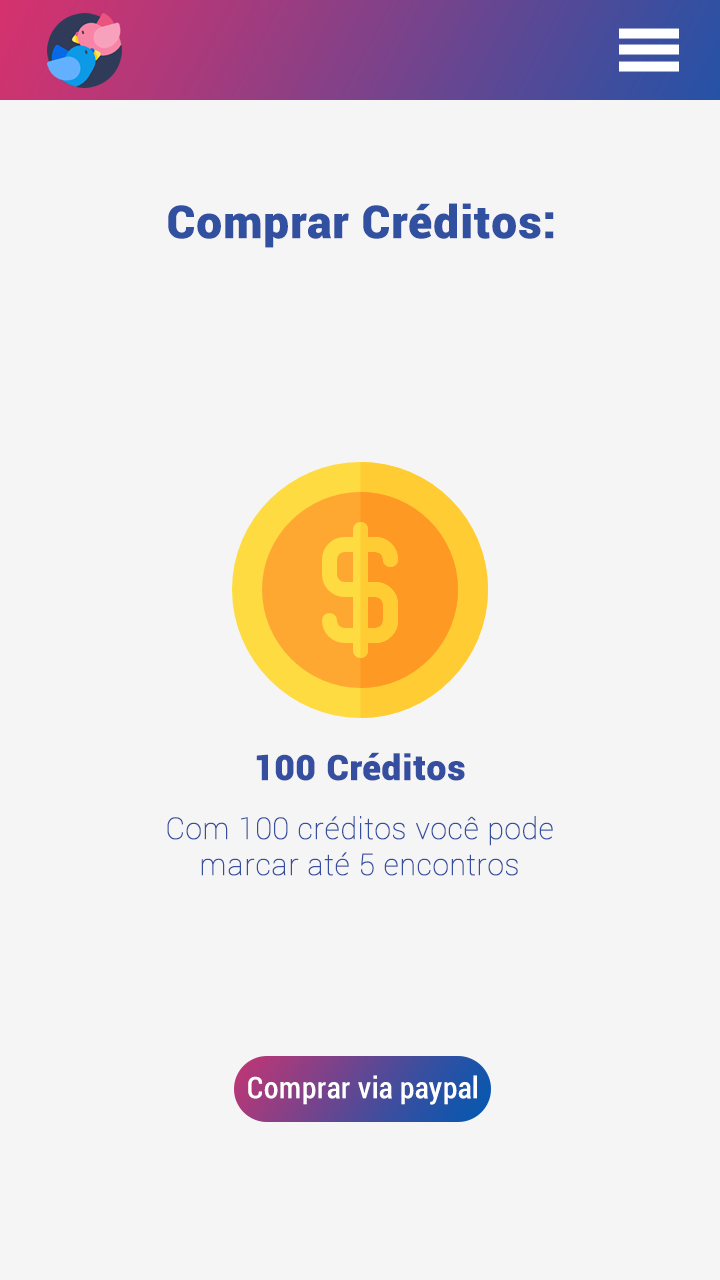
<style>
.page{position:relative;width:720px;height:1280px;background:#f5f5f5}
.page>*{position:absolute;margin:0}
.t1{font:45px "Roboto-Black";color:#3150a0;font-weight:bold}
.t2{font:35px "Roboto-Black";color:#354e9f;font-weight:bold}
.t3{font:30px/36px "Roboto-Thin";color:#354e9f;font-weight:bold}
.t4{font:29px "Roboto-Condensed";color:#ffffff;font-weight:bold}
</style>
<div class="page">
<p class="t1" style="left:168px;top:203px;width:386px;height:45px">Comprar Créditos:</p>
<p class="t2" style="left:256px;top:752px;width:209px;height:29px">100 Créditos</p>
<p class="t3" style="left:167px;top:816px;width:386px;height:60px;text-align:center">Com 100 créditos você pode marcar até 5 encontros</p>
<p class="t4" style="left:248px;top:1075px;width:229px;height:30px">Comprar via paypal</p>
</div>
